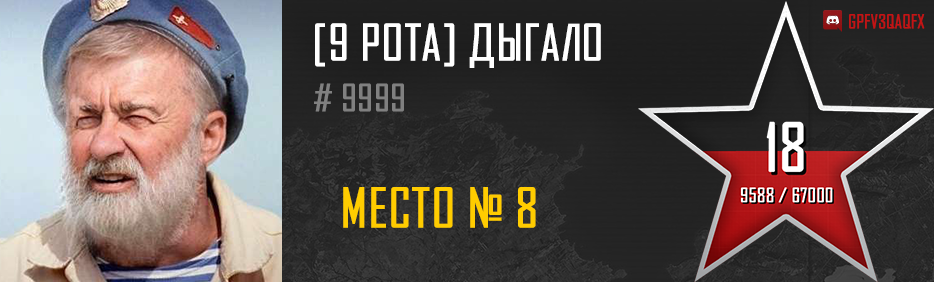
<style>
.page{position:relative;width:934px;height:282px}
.page>*{position:absolute;margin:0}
.t1{font:17.6px "AgencyFBCyrillic";color:#c51314;text-transform:uppercase;font-weight:bold}
.t2{font:48px "AgencyFBCyrillic";color:#ffffff;text-transform:uppercase;font-weight:bold}
.t3{font:36px "AgencyFBCyrillic";color:#808080;text-transform:uppercase;font-weight:bold}
.t4{font:52.3px "AgencyFBCyrillic";color:#ffcc00;text-transform:uppercase;font-weight:bold}
</style>
<div class="page">
<p class="t1" style="left:849px;top:14px;width:76px;height:15px">GPfv3qAQFX</p>
<p class="t2" style="left:315px;top:23px;width:286px;height:45px">[9 РОТА] Дыгало</p>
<p class="t3" style="left:314px;top:83px;width:90px;height:29px"># 9999</p>
<p class="t4" style="left:343px;top:187px;width:193px;height:41px">МЕСТО № 8</p>
</div>
